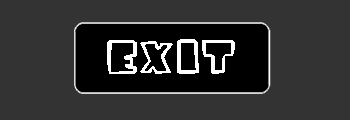
<style>
.page{position:relative;width:350px;height:120px;background:#333333}
.page>*{position:absolute;margin:0}
.t1{font:72px "iceagefont";color:#ffffff}
</style>
<div class="page">
<p class="t1" style="left:107px;top:39px;width:128px;height:35px">EXIT</p>
</div>
